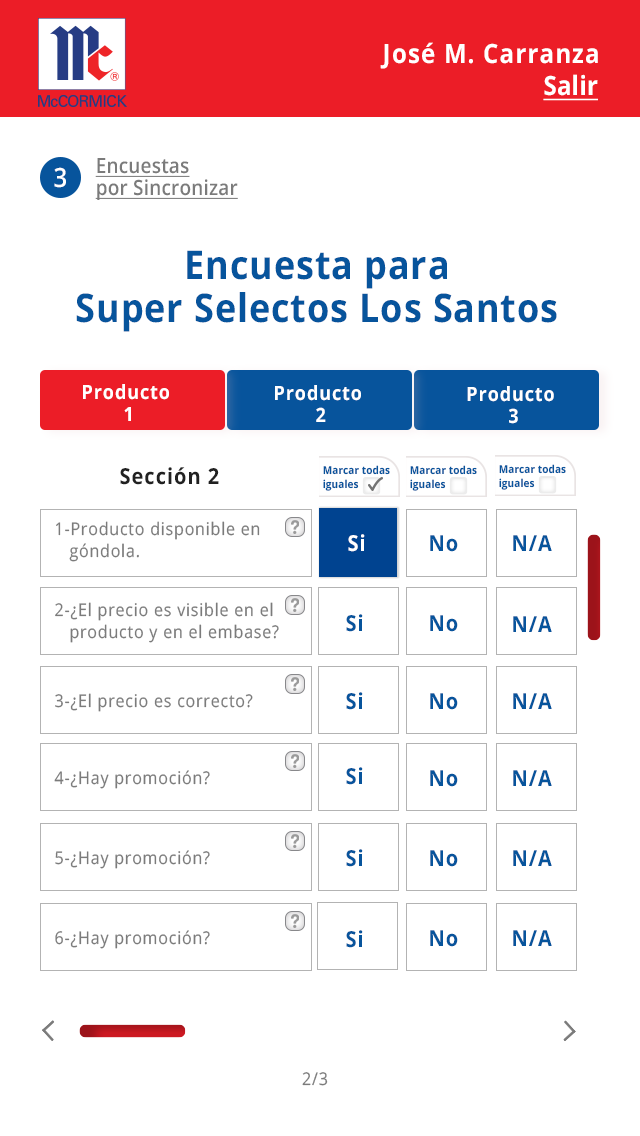
<style>
.page{position:relative;width:640px;height:1136px;background:#ffffff}
.page>*{position:absolute;margin:0}
.t1{font:26.4px "OpenSans-Bold";letter-spacing:0.05em;color:#ffffff;scale:0.91 1}
.t2{font:26.4px "OpenSans-Bold";letter-spacing:0.01em;color:#ffffff;text-decoration:underline;scale:0.91 1}
.t3{font:20.9px/22px "OpenSans-SemiBold";letter-spacing:0.01em;color:#7b7b7b;text-decoration:underline;scale:0.91 1}
.t4{font:26.4px "OpenSans-SemiBold";letter-spacing:0.05em;color:#ffffff;scale:0.91 1}
.t5{font:39.6px "OpenSans-Bold";letter-spacing:0.025em;color:#07549c;scale:0.91 1}
.t6{font:19.8px/22px "OpenSans-Bold";letter-spacing:0.05em;color:#ffffff;scale:0.91 1}
.t7{font:22px "OpenSans-Bold";letter-spacing:0.05em;color:#212121;scale:0.91 1}
.t8{font:11px/14px "OpenSans-Bold";letter-spacing:0.01em;color:#07549c;scale:0.91 1}
.t9{font:17.6px/22px "OpenSans-Regular";letter-spacing:0.05em;color:#7b7b7b;scale:0.91 1}
.t10{font:22px "OpenSans-Bold";letter-spacing:0.05em;color:#ffffff;scale:0.91 1}
.t11{font:22px "OpenSans-Bold";letter-spacing:0.05em;color:#07549c;scale:0.91 1}
.t12{font:17.6px "OpenSans-Regular";letter-spacing:0.05em;color:#7b7b7b;scale:0.91 1}
</style>
<div class="page">
<p class="t1" style="left:380px;top:42px;width:218px;height:27px">José M. Carranza</p>
<p class="t2" style="left:543px;top:74px;width:55px;height:27px">Salir</p>
<p class="t3" style="left:95px;top:158px;width:143px;height:42px">Encuestas<br>por Sincronizar</p>
<p class="t4" style="left:54px;top:167px;width:12px;height:21px">3</p>
<p class="t5" style="left:76px;top:250px;width:481px;height:82px;text-align:center">Encuesta para<br>Super Selectos Los Santos</p>
<p class="t6" style="left:83px;top:384px;width:86px;height:37px;text-align:center">Producto <br>1</p>
<p class="t6" style="left:275px;top:385px;width:86px;height:37px;text-align:center">Producto <br>2</p>
<p class="t6" style="left:467px;top:386px;width:87px;height:38px;text-align:center">Producto<br> 3</p>
<p class="t7" style="left:120px;top:467px;width:99px;height:18px">Sección 2</p>
<p class="t8" style="left:323px;top:465px;width:67px;height:26px">Marcar todas<br>iguales</p>
<p class="t8" style="left:410px;top:465px;width:67px;height:26px">Marcar todas<br>iguales</p>
<p class="t8" style="left:499px;top:464px;width:67px;height:26px">Marcar todas<br>iguales</p>
<p class="t9" style="left:56px;top:521px;width:204px;height:41px">1-Producto disponible en <br>   góndola.</p>
<p class="t10" style="left:348px;top:534px;width:17px;height:18px">Si</p>
<p class="t11" style="left:430px;top:535px;width:28px;height:17px">No</p>
<p class="t11" style="left:513px;top:535px;width:39px;height:16px">N/A</p>
<p class="t9" style="left:55px;top:602px;width:224px;height:41px">2-¿El precio es visible en el <br>   producto y en el embase?</p>
<p class="t11" style="left:346px;top:614px;width:17px;height:18px">Si</p>
<p class="t11" style="left:430px;top:615px;width:28px;height:17px">No</p>
<p class="t11" style="left:513px;top:616px;width:39px;height:16px">N/A</p>
<p class="t12" style="left:55px;top:693px;width:198px;height:19px">3-¿El precio es correcto?</p>
<p class="t11" style="left:346px;top:692px;width:17px;height:18px">Si</p>
<p class="t11" style="left:430px;top:693px;width:28px;height:17px">No</p>
<p class="t11" style="left:513px;top:693px;width:39px;height:16px">N/A</p>
<p class="t12" style="left:54px;top:770px;width:156px;height:19px">4-¿Hay promoción?</p>
<p class="t11" style="left:346px;top:767px;width:17px;height:18px">Si</p>
<p class="t11" style="left:430px;top:770px;width:28px;height:17px">No</p>
<p class="t11" style="left:513px;top:770px;width:39px;height:16px">N/A</p>
<p class="t12" style="left:55px;top:850px;width:155px;height:19px">5-¿Hay promoción?</p>
<p class="t11" style="left:346px;top:849px;width:17px;height:18px">Si</p>
<p class="t11" style="left:430px;top:850px;width:28px;height:17px">No</p>
<p class="t11" style="left:513px;top:850px;width:39px;height:16px">N/A</p>
<p class="t12" style="left:55px;top:930px;width:155px;height:19px">6-¿Hay promoción?</p>
<p class="t11" style="left:346px;top:930px;width:17px;height:18px">Si</p>
<p class="t11" style="left:430px;top:930px;width:28px;height:17px">No</p>
<p class="t11" style="left:513px;top:930px;width:39px;height:16px">N/A</p>
<p class="t12" style="left:302px;top:1072px;width:26px;height:14px">2/3</p>
</div>
